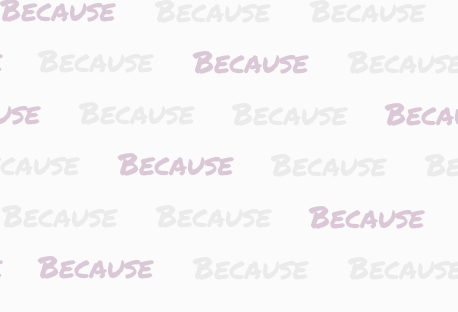
<style>
.page{position:relative;width:458px;height:312px;background:#fbfbfb}
.page>*{position:absolute;margin:0}
.t1{font:30px "PermanentMarker";color:#dac8d7}
.t2{font:30px "PermanentMarker";color:#ebebeb}
</style>
<div class="page">
<p class="t1" style="left:0px;top:0px;width:116px;height:22px">Because</p>
<p class="t2" style="left:154px;top:0px;width:117px;height:23px">Because</p>
<p class="t2" style="left:309px;top:0px;width:117px;height:23px">Because</p>
<p class="t2" style="left:37px;top:50px;width:117px;height:23px">Because</p>
<p class="t1" style="left:192px;top:51px;width:117px;height:23px">Because</p>
<p class="t2" style="left:78px;top:102px;width:117px;height:23px">Because</p>
<p class="t2" style="left:231px;top:103px;width:117px;height:23px">Because</p>
<p class="t1" style="left:117px;top:153px;width:117px;height:23px">Because</p>
<p class="t2" style="left:270px;top:154px;width:117px;height:23px">Because</p>
<p class="t2" style="left:1px;top:205px;width:117px;height:23px">Because</p>
<p class="t2" style="left:155px;top:205px;width:117px;height:23px">Because</p>
<p class="t1" style="left:308px;top:206px;width:117px;height:23px">Because</p>
<p class="t1" style="left:37px;top:256px;width:117px;height:23px">Because</p>
<p class="t2" style="left:192px;top:257px;width:117px;height:23px">Because</p>
</div>
